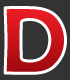
<style>
.page{position:relative;width:70px;height:80px;background:#333333}
.page>*{position:absolute;margin:0}
.t1{font:100px "BerlinSansFBDemi-Bold";letter-spacing:0.2em}
</style>
<div class="page">
<p class="t1" style="left:3px;top:6px;width:64px;height:69px">D</p>
</div>
